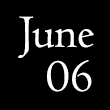
<style>
.page{position:relative;width:110px;height:110px;background:#000000}
.page>*{position:absolute;margin:0}
.t1{font:48px "Centaur";color:#ffffff}
</style>
<div class="page">
<p class="t1" style="left:18px;top:16px;width:76px;height:42px">June</p>
<p class="t1" style="left:47px;top:60px;width:45px;height:32px">06</p>
</div>
